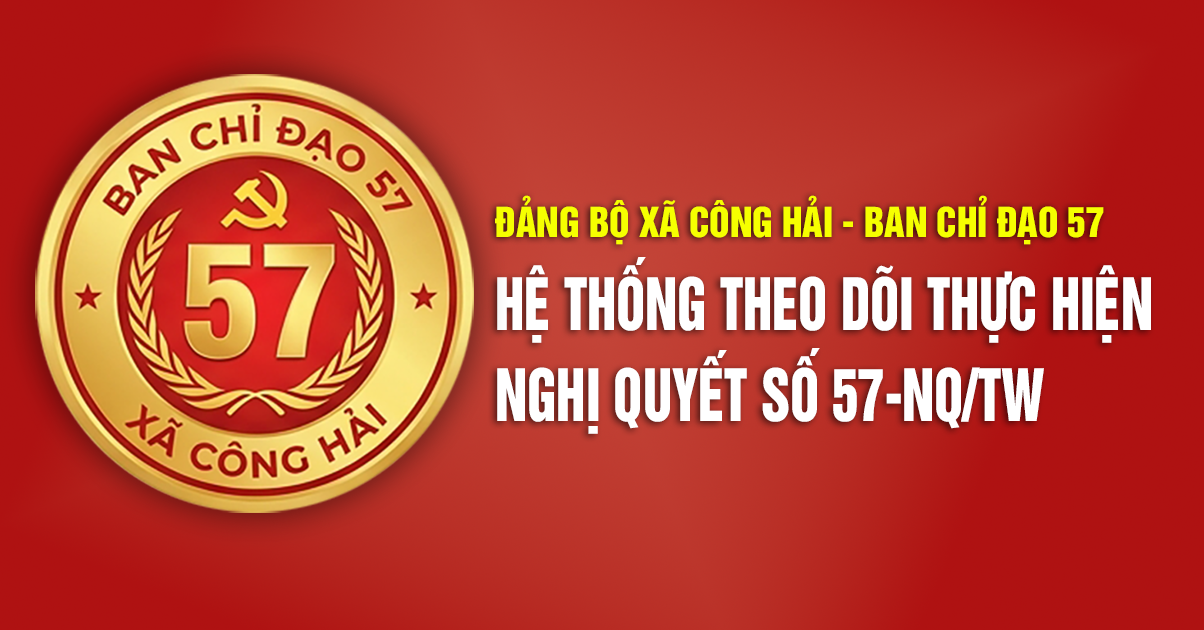
<style>
.page{position:relative;width:1204px;height:630px}
.page>*{position:absolute;margin:0}
.t1{font:37.7px "UTM-HelvetIns";color:#f6ff00}
.t2{font:65.9px/90.5px "UTM-HelvetIns";color:#ffffff;scale:0.8 1}
</style>
<div class="page">
<p class="t1" style="left:495px;top:195px;width:609px;height:50px">ĐẢNG BỘ XÃ CÔNG HẢI - BAN CHỈ ĐẠO 57</p>
<p class="t2" style="left:497px;top:257px;width:654px;height:177px">HỆ THỐNG THEO DÕI THỰC HIỆN<br>NGHỊ QUYẾT SỐ 57-NQ/TW</p>
</div>
